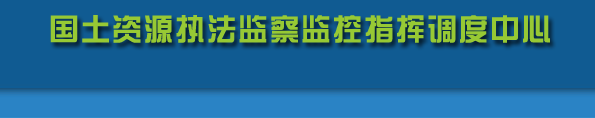
<style>
.page{position:relative;width:595px;height:118px;background:#105b92}
.page>*{position:absolute;margin:0}
.t1{font:30px "HYk1gj";letter-spacing:0.05em;color:#97c934}
</style>
<div class="page">
<p class="t1" style="left:50px;top:15px;width:500px;height:28px">国土资源执法监察监控指挥调度中心</p>
</div>
